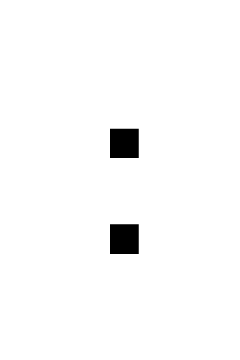
<style>
.page{position:relative;width:240px;height:360px;background:#ffffff}
.page>*{position:absolute;margin:0}
.t1{font:200px "MoeumTXB-HM";color:#000000;scale:1.06 1}
</style>
<div class="page">
<p class="t1" style="left:110px;top:128px;width:29px;height:126px">:</p>
</div>
